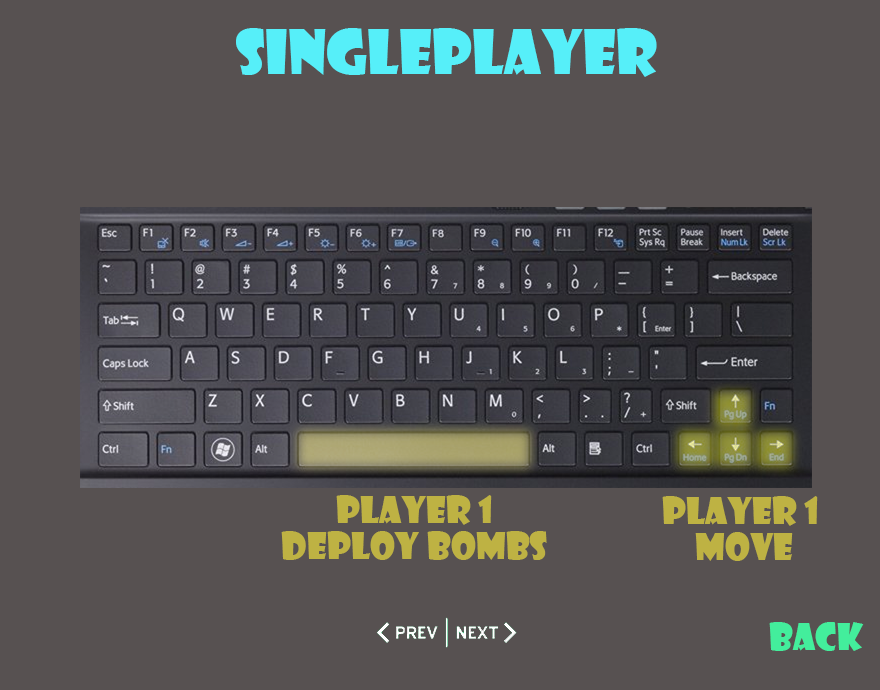
<style>
.page{position:relative;width:880px;height:690px;background:#575151}
.page>*{position:absolute;margin:0}
.t1{font:60px "ShowcardGothic-Reg";color:#56eff9}
.t2{font:36px/36px "ShowcardGothic-Reg";color:#beb243}
.t3{font:36px "ShowcardGothic-Reg";color:#43ee9c}
</style>
<div class="page">
<p class="t1" style="left:236px;top:28px;width:421px;height:49px">SinglePlayer</p>
<p class="t2" style="left:281px;top:495px;width:266px;height:65px;text-align:center">Player 1 <br>Deploy bombs</p>
<p class="t2" style="left:662px;top:496px;width:156px;height:65px;text-align:center">Player 1 <br>Move</p>
<p class="t3" style="left:769px;top:622px;width:95px;height:29px">back</p>
</div>
